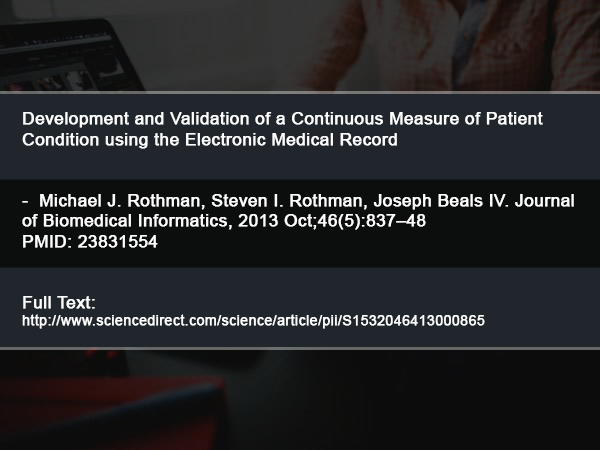
<style>
.page{position:relative;width:600px;height:450px;background:#20262c}
.page>*{position:absolute;margin:0}
.t1{font:17px "ArialMT";letter-spacing:0.01em;color:#ffffff;font-weight:bold}
.t2{font:14px "ArialMT";letter-spacing:0.01em;color:#ffffff;font-weight:bold}
</style>
<div class="page">
<p class="t1" style="left:22px;top:112px;width:552px;height:217px">Development and Validation of a Continuous Measure of Patient Condition using the Electronic Medical Record <br><br><br>-  Michael J. Rothman, Steven I. Rothman, Joseph Beals IV. Journal of Biomedical Informatics, 2013 Oct;46(5):837–48<br>PMID: 23831554<br><br><br>Full Text: <br><span class="t2">http://www.sciencedirect.com/science/article/pii/S1532046413000865</span></p>
</div>
